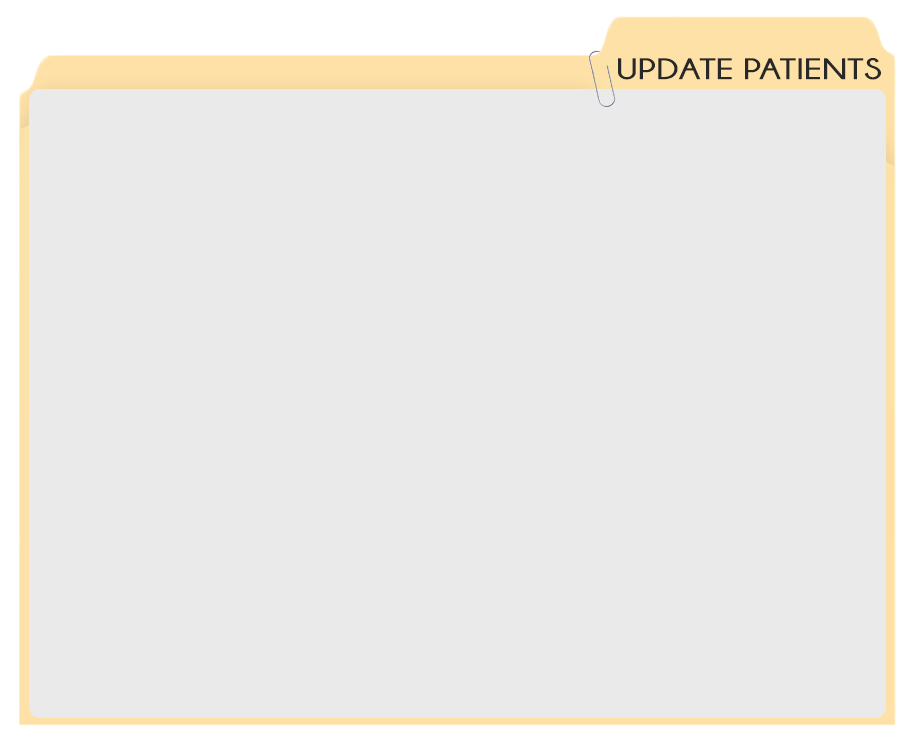
<style>
.page{position:relative;width:923px;height:754px;background:#eaeaea}
.page>*{position:absolute;margin:0}
.t1{font:30px "Champagne&Limousines-Bold";color:#282828;scale:1.23 1}
</style>
<div class="page">
<p class="t1" style="left:618px;top:58px;width:263px;height:22px">UPDATE PATIENTS</p>
</div>
